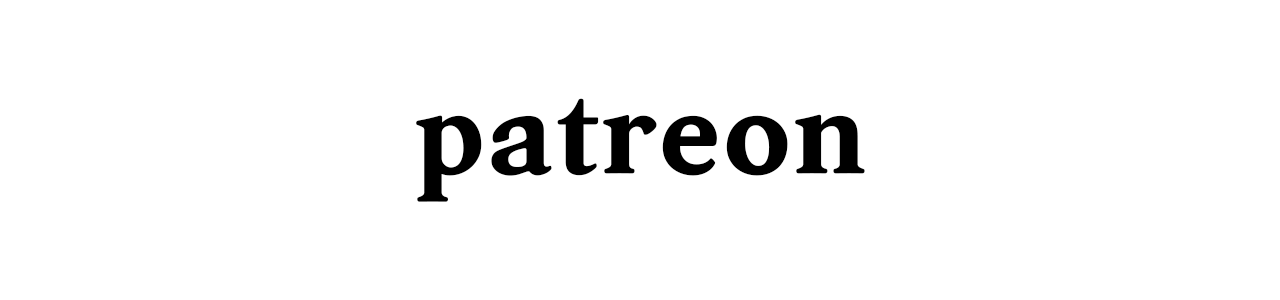
<style>
.page{position:relative;width:1280px;height:300px;background:#ffffff}
.page>*{position:absolute;margin:0}
.t1{font:109.1px "RixDongnimMyeongjoR";color:#000000}
</style>
<div class="page">
<p class="t1" style="left:416px;top:98px;width:449px;height:104px">patreon</p>
</div>
